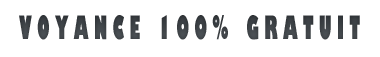
<style>
.page{position:relative;width:380px;height:57px;background:#ffffff}
.page>*{position:absolute;margin:0}
.t1{font:31.6px "GillSans-UltraBoldCondensed";letter-spacing:0.24em;color:#3d4246;scale:0.7 1}
</style>
<div class="page">
<p class="t1" style="left:19px;top:15px;width:341px;height:25px">VOYANCE 100% GRATUIT</p>
</div>
